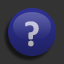
<style>
.page{position:relative;width:64px;height:64px;background:#333333}
.page>*{position:absolute;margin:0}
.t1{font:36px "Calibri-Bold";color:#bdbdcf}
</style>
<div class="page">
<p class="t1" style="left:25px;top:21px;width:14px;height:26px">?</p>
</div>
